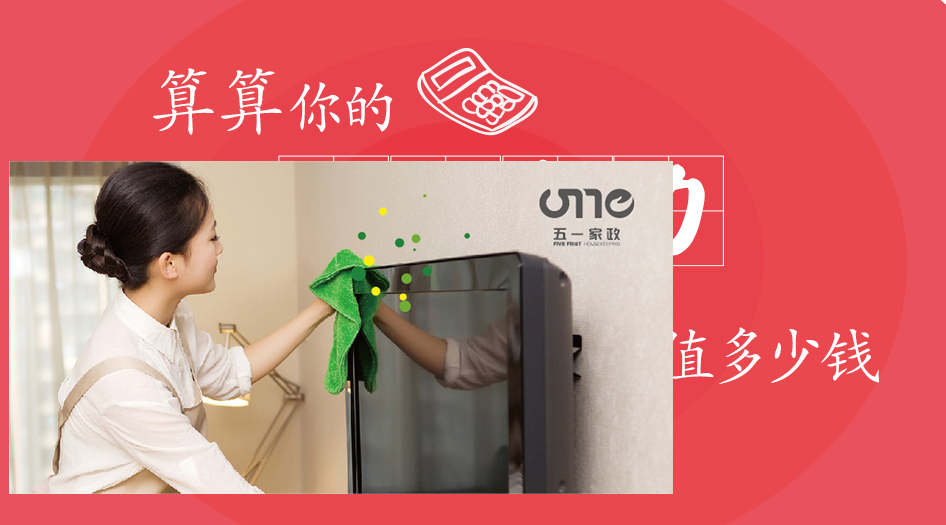
<style>
.page{position:relative;width:946px;height:525px;background:#e9484f}
.page>*{position:absolute;margin:0}
.t1{font:69.8px "FZKTJW--GB1-0";letter-spacing:-0.033em;color:#ffffff}
.t2{font:69.8px "FZKTJW--GB1-0";color:#ffffff}
.t3{font:58.6px "FZKTJW--GB1-0";letter-spacing:-0.07em;color:#ffffff}
.t4{font:58.6px "FZKTJW--GB1-0";color:#ffffff}
.t5{font:62.2px "FZKTJW--GB1-0";letter-spacing:-0.09em;color:#ffffff}
.t6{font:62.2px "FZKTJW--GB1-0";letter-spacing:-0.141em;color:#ffffff}
.t7{font:62.2px "FZKTJW--GB1-0";letter-spacing:-0.092em;color:#ffffff}
.t8{font:62.2px "FZKTJW--GB1-0";color:#ffffff}
</style>
<div class="page">
<p class="t1" style="left:153px;top:68px;width:129px;height:67px">算<span class="t2">算</span></p>
<p class="t3" style="left:290px;top:82px;width:103px;height:50px">你<span class="t4">的</span></p>
<p class="t5" style="left:654px;top:327px;width:225px;height:57px">值<span class="t6">多</span><span class="t7">少</span><span class="t8">钱</span></p>
</div>
